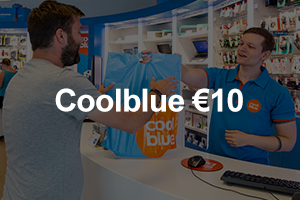
<style>
.page{position:relative;width:300px;height:200px}
.page>*{position:absolute;margin:0}
.t1{font:31.6px "Arial-BoldMT";letter-spacing:-0.02em;color:#ffffff}
</style>
<div class="page">
<p class="t1" style="left:55px;top:88px;width:188px;height:24px">Coolblue €10</p>
</div>
